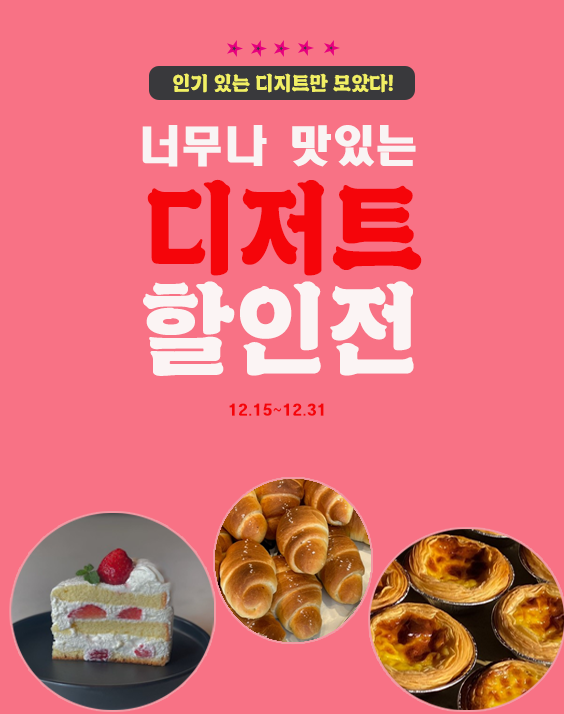
<style>
.page{position:relative;width:564px;height:714px;background:#f87285}
.page>*{position:absolute;margin:0}
.t1{font:19.8px "Miwon";color:#f1ef64}
.t2{font:43.1px "HeadlineR-HM";color:#f9f4f4}
.t3{font:101.7px "Miwon";color:#f5050a}
.t4{font:101.2px "Miwon";color:#fbf4f4}
.t5{font:14px "HeadlineR-HM";color:#f5050a}
</style>
<div class="page">
<p class="t1" style="left:173px;top:73px;width:220px;height:20px">인기 있는 디지트만 모았다!</p>
<p class="t2" style="left:142px;top:125px;width:274px;height:42px">너무나 맛있는</p>
<p class="t3" style="left:147px;top:179px;width:275px;height:97px">디저트</p>
<p class="t4" style="left:143px;top:281px;width:271px;height:95px">할인전</p>
<p class="t5" style="left:229px;top:403px;width:95px;height:13px">12.15~12.31</p>
</div>
